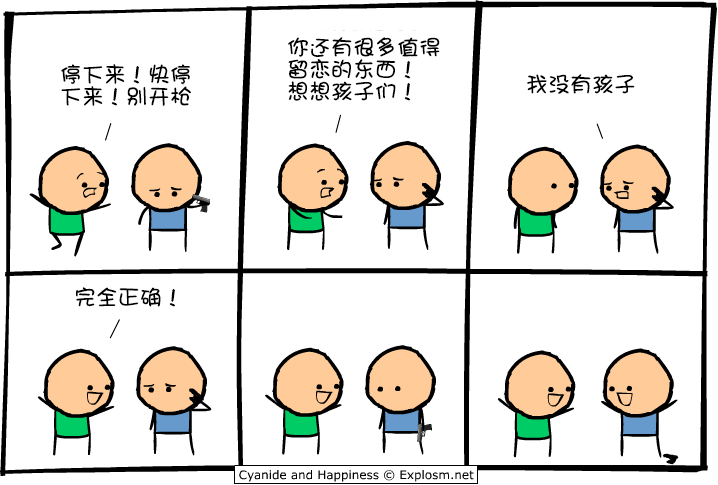
<style>
.page{position:relative;width:718px;height:485px;background:#ffffff}
.page>*{position:absolute;margin:0}
.t1{font:22px/22px "DFGirl";color:#000000}
.t2{font:22px "DFGirl";color:#000000}
</style>
<div class="page">
<p class="t1" style="left:288px;top:37px;width:152px;height:64px">你还有很多值得<br>留恋的东西！<br>想想孩子们！</p>
<p class="t1" style="left:61px;top:64px;width:130px;height:42px">停下来！快停<br>下来！别开枪</p>
<p class="t2" style="left:527px;top:74px;width:108px;height:20px">我没有孩子</p>
<p class="t2" style="left:76px;top:287px;width:100px;height:20px">完全正确！</p>
</div>
